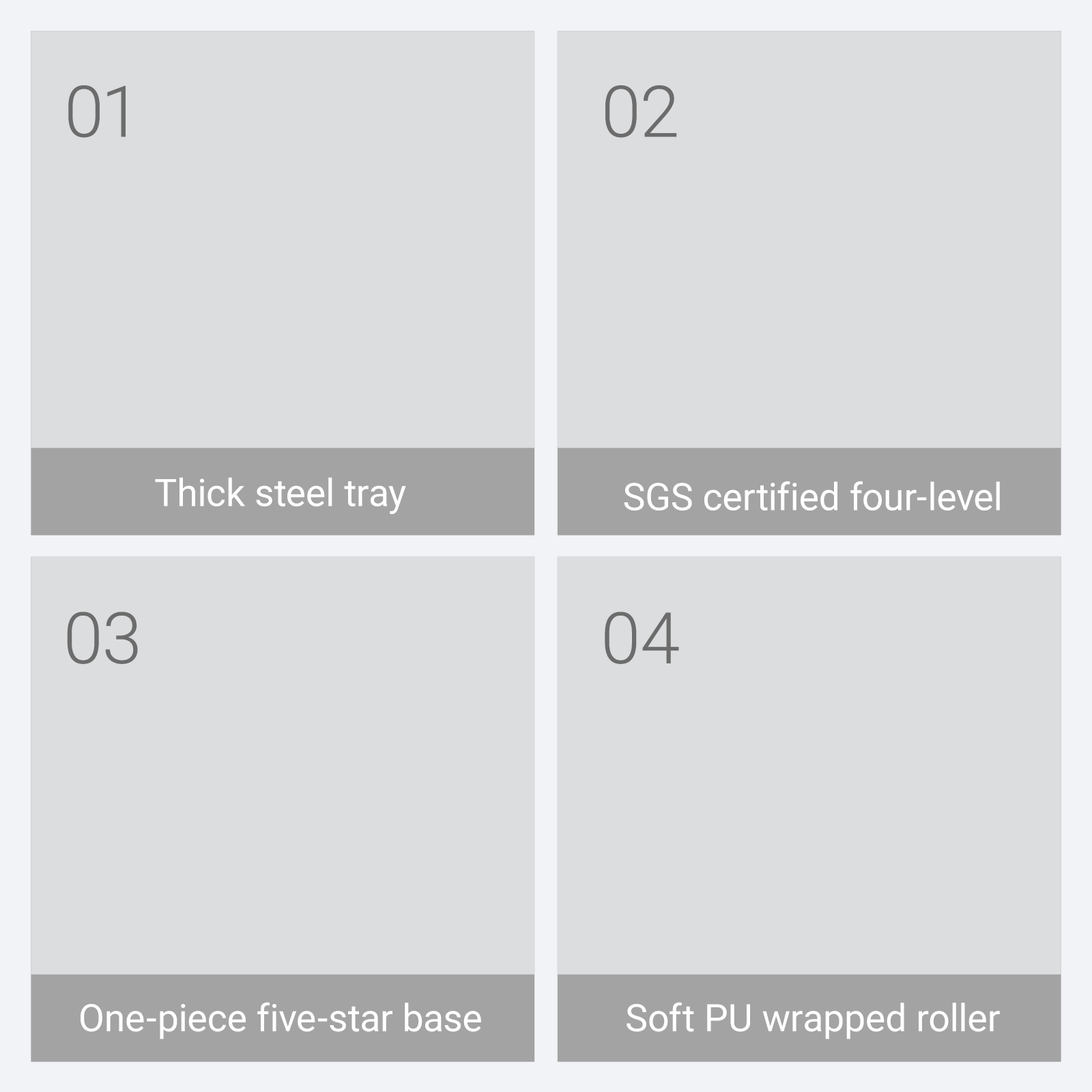
<style>
.page{position:relative;width:1092px;height:1092px;background:#dcdddf}
.page>*{position:absolute;margin:0}
.t1{font:71.3px "Roboto-Light";color:#6c6c6c}
.t2{font:37.9px "Roboto-Regular";color:#ffffff}
</style>
<div class="page">
<p class="t1" style="left:68px;top:85px;width:58px;height:53px">01</p>
<p class="t1" style="left:605px;top:85px;width:72px;height:53px">02</p>
<p class="t2" style="left:155px;top:477px;width:251px;height:38px">Thick steel tray</p>
<p class="t2" style="left:624px;top:481px;width:376px;height:30px">SGS certified four-level</p>
<p class="t1" style="left:67px;top:612px;width:71px;height:52px">03</p>
<p class="t1" style="left:605px;top:612px;width:74px;height:52px">04</p>
<p class="t2" style="left:81px;top:1002px;width:400px;height:37px">One-piece five-star base</p>
<p class="t2" style="left:627px;top:1002px;width:373px;height:37px">Soft PU wrapped roller</p>
</div>
